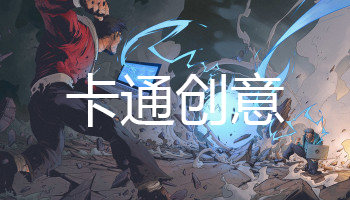
<style>
.page{position:relative;width:350px;height:200px}
.page>*{position:absolute;margin:0}
.t1{font:55px "MicrosoftYaHei";color:#ffffff}
</style>
<div class="page">
<p class="t1" style="left:66px;top:72px;width:219px;height:55px">卡通创意</p>
</div>
